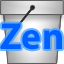
<style>
.page{position:relative;width:64px;height:64px}
.page>*{position:absolute;margin:0}
.t1{font:38px "MyriadPro-Bold";color:#0060ff}
</style>
<div class="page">
<p class="t1" style="left:0px;top:23px;width:62px;height:27px">Zen</p>
</div>
